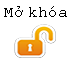
<style>
.page{position:relative;width:71px;height:58px;background:#ffffff}
.page>*{position:absolute;margin:0}
.t1{font:12px "CourierNewPSMT";color:#000000}
</style>
<div class="page">
<p class="t1" style="left:4px;top:6px;width:63px;height:11px">Mở khóa</p>
</div>
